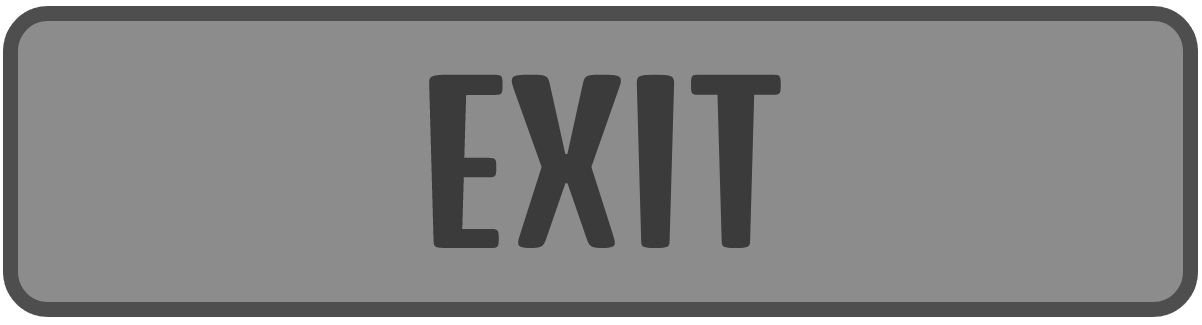
<style>
.page{position:relative;width:1202px;height:325px;background:#8c8c8c}
.page>*{position:absolute;margin:0}
.t1{font:210px "DenkOne-Regular";color:#3b3b3b}
</style>
<div class="page">
<p class="t1" style="left:429px;top:74px;width:352px;height:174px">EXIT</p>
</div>
